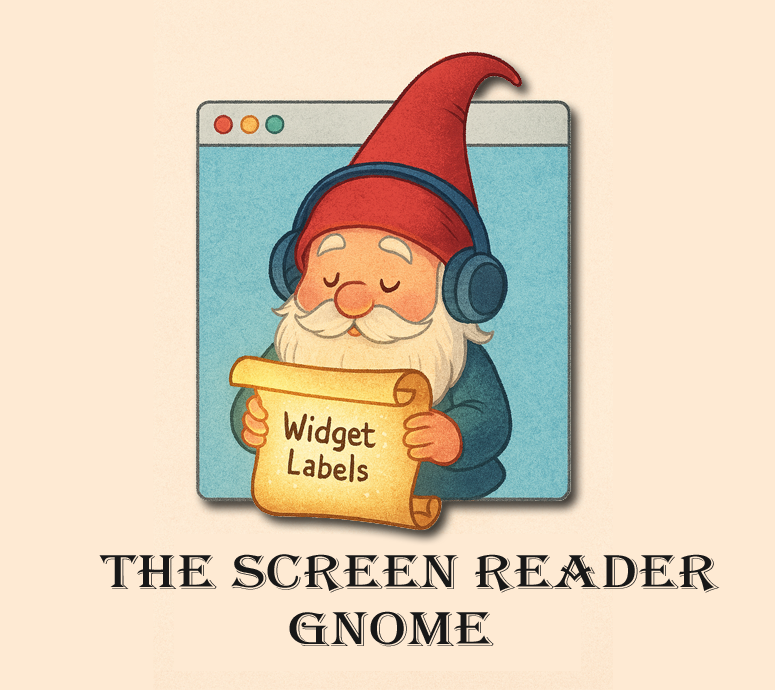
<style>
.page{position:relative;width:775px;height:690px;background:#feead3}
.page>*{position:absolute;margin:0}
.t1{font:50.7px "Algerian";color:#181818;scale:1.24 1}
</style>
<div class="page">
<p class="t1" style="left:99px;top:554px;width:621px;height:39px">The Screen Reader</p>
<p class="t1" style="left:289px;top:611px;width:205px;height:36px">Gnome</p>
</div>
